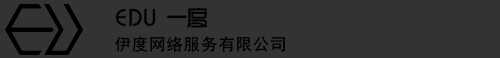
<style>
.page{position:relative;width:500px;height:58px;background:#333333}
.page>*{position:absolute;margin:0}
.t1{font:16.6px "SimHei";letter-spacing:0.05em;color:#000000}
</style>
<div class="page">
<p class="t1" style="left:115px;top:36px;width:170px;height:16px">伊度网络服务有限公司</p>
</div>
